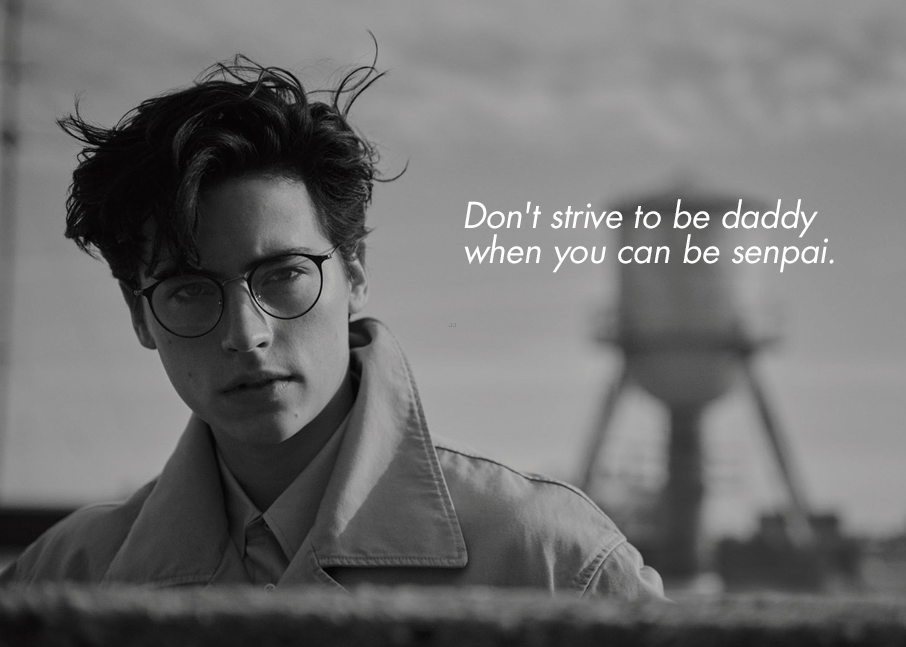
<style>
.page{position:relative;width:906px;height:647px}
.page>*{position:absolute;margin:0}
.t1{font:34.7px/34.7px "Futura-BookOblique";color:#ffffff}
</style>
<div class="page">
<p class="t1" style="left:464px;top:199px;width:370px;height:74px">Don't strive to be daddy when you can be senpai.</p>
</div>
